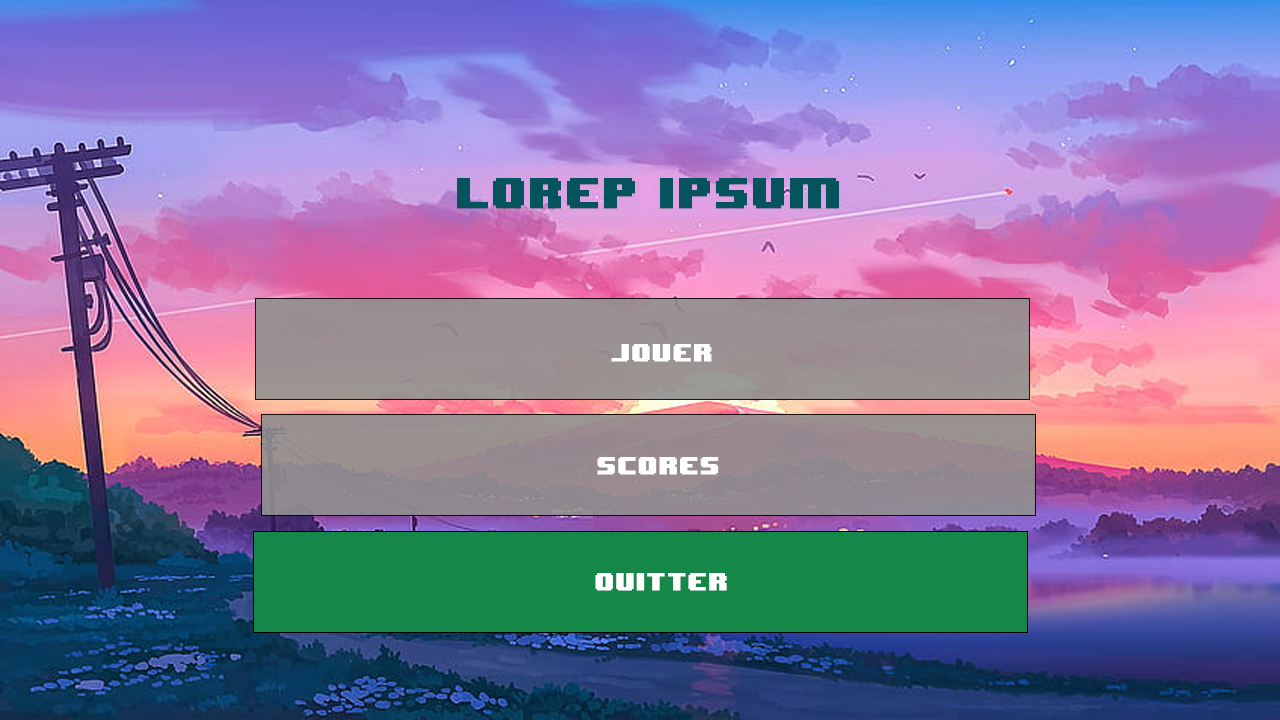
<style>
.page{position:relative;width:1280px;height:720px}
.page>*{position:absolute;margin:0}
.t1{font:36px "8BITWONDERNominal";color:#05535c;font-weight:bold}
.t2{font:20.1px "8BITWONDERNominal";color:#ffffff;font-weight:bold}
</style>
<div class="page">
<p class="t1" style="left:457px;top:178px;width:382px;height:31px">LOREP IPSUM</p>
<p class="t2" style="left:611px;top:344px;width:101px;height:18px">JOUER</p>
<p class="t2" style="left:597px;top:457px;width:122px;height:18px">scores</p>
<p class="t2" style="left:595px;top:573px;width:132px;height:18px">QUITTER</p>
</div>
